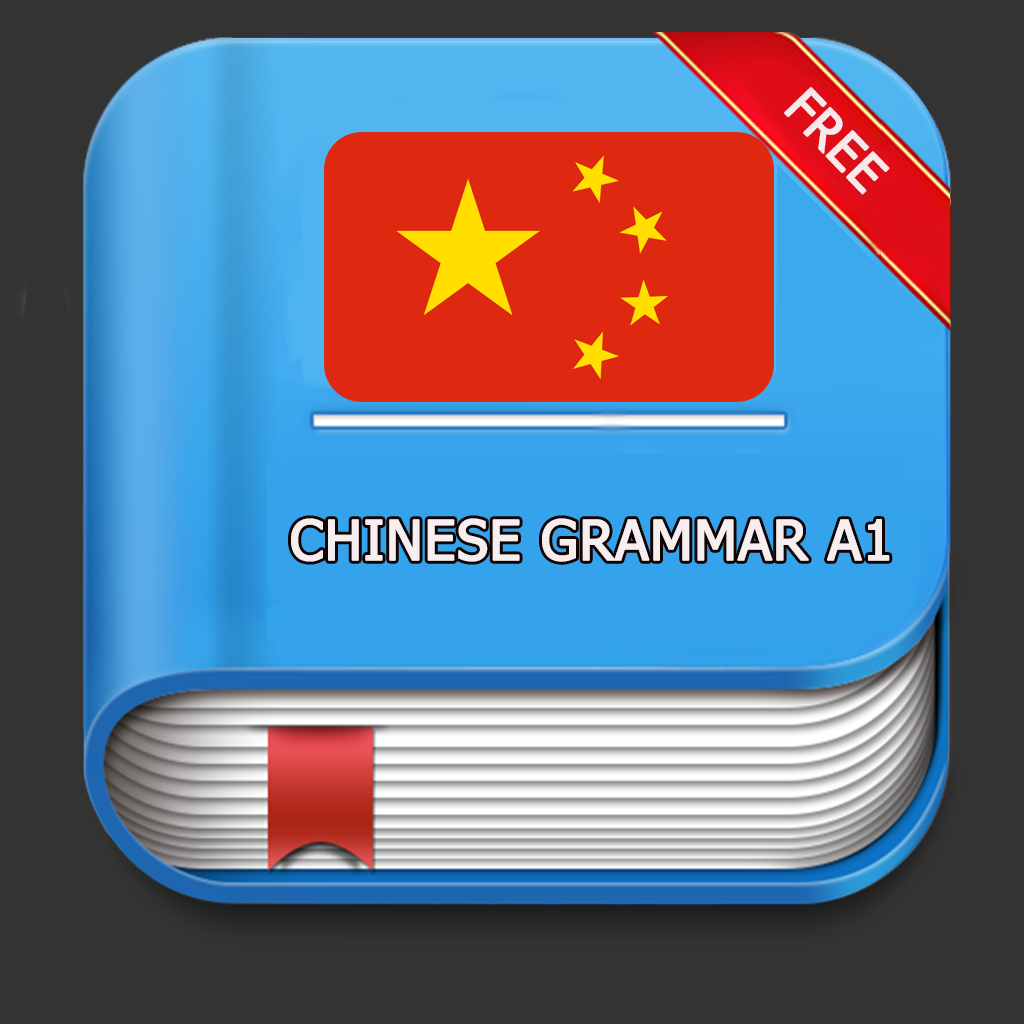
<style>
.page{position:relative;width:1024px;height:1024px;background:#333333}
.page>*{position:absolute;margin:0}
.t1{font:50px "Tahoma";color:#f5e9eb;font-weight:bold}
.t2{font:55px "Tahoma";letter-spacing:0.005em;color:#f7eeef;font-weight:bold}
</style>
<div class="page">
<p class="t1" style="left:784px;top:87px;width:106px;height:108px;rotate:46deg">FREE</p>
<p class="t2" style="left:291px;top:518px;width:599px;height:44px">CHINESE GRAMMAR A1</p>
</div>
